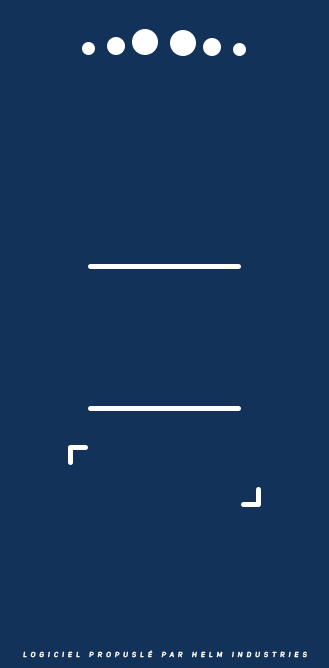
<style>
.page{position:relative;width:329px;height:668px;background:#123259}
.page>*{position:absolute;margin:0}
.t1{font:7px "UniSansSemiBoldItalic";letter-spacing:0.585em;color:#ffffff;text-transform:uppercase}
</style>
<div class="page">
<p class="t1" style="left:23px;top:650px;width:284px;height:8px">logiciel propuslé par helm industries</p>
</div>
